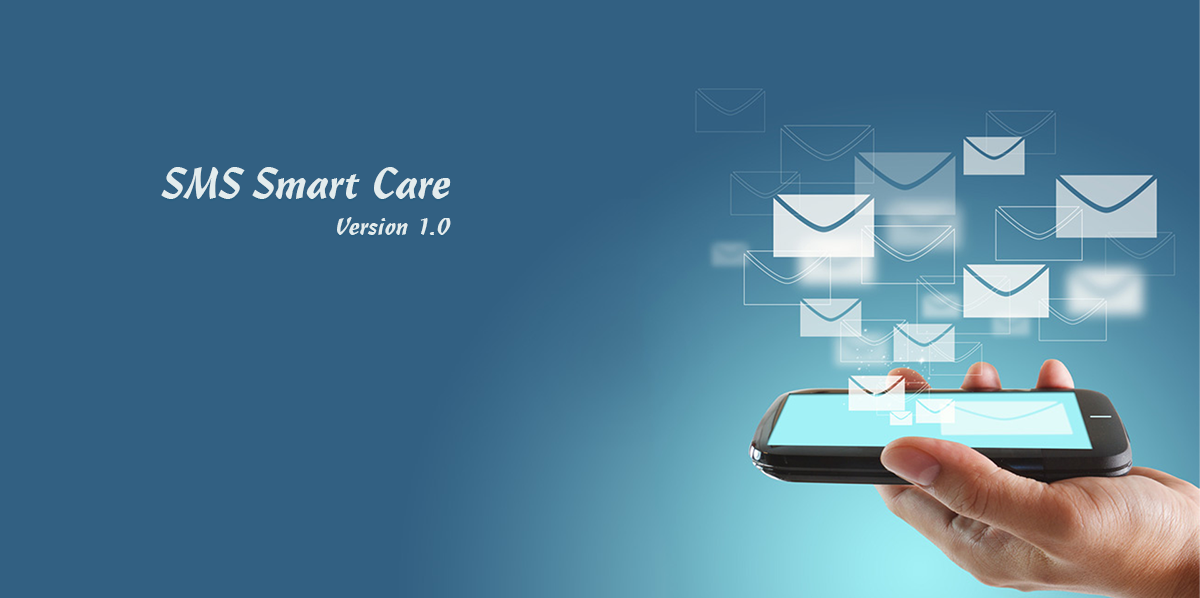
<style>
.page{position:relative;width:1200px;height:598px;background:#326082}
.page>*{position:absolute;margin:0}
.t1{font:42.5px "UVNMangTre";color:#e3eced;scale:1.04 1}
.t2{font:24px "UVNMangTre";color:#e3eced;scale:1.04 1}
</style>
<div class="page">
<p class="t1" style="left:161px;top:167px;width:290px;height:32px">SMS Smart Care</p>
<p class="t2" style="left:337px;top:217px;width:114px;height:18px">Version 1.0</p>
</div>
